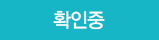
<style>
.page{position:relative;width:159px;height:40px;background:#16b6c6}
.page>*{position:absolute;margin:0}
.t1{font:20px "YDVYGO33";letter-spacing:-0.025em;color:#ffffff;scale:0.95 1}
</style>
<div class="page">
<p class="t1" style="left:53px;top:10px;width:52px;height:20px">확인중</p>
</div>
